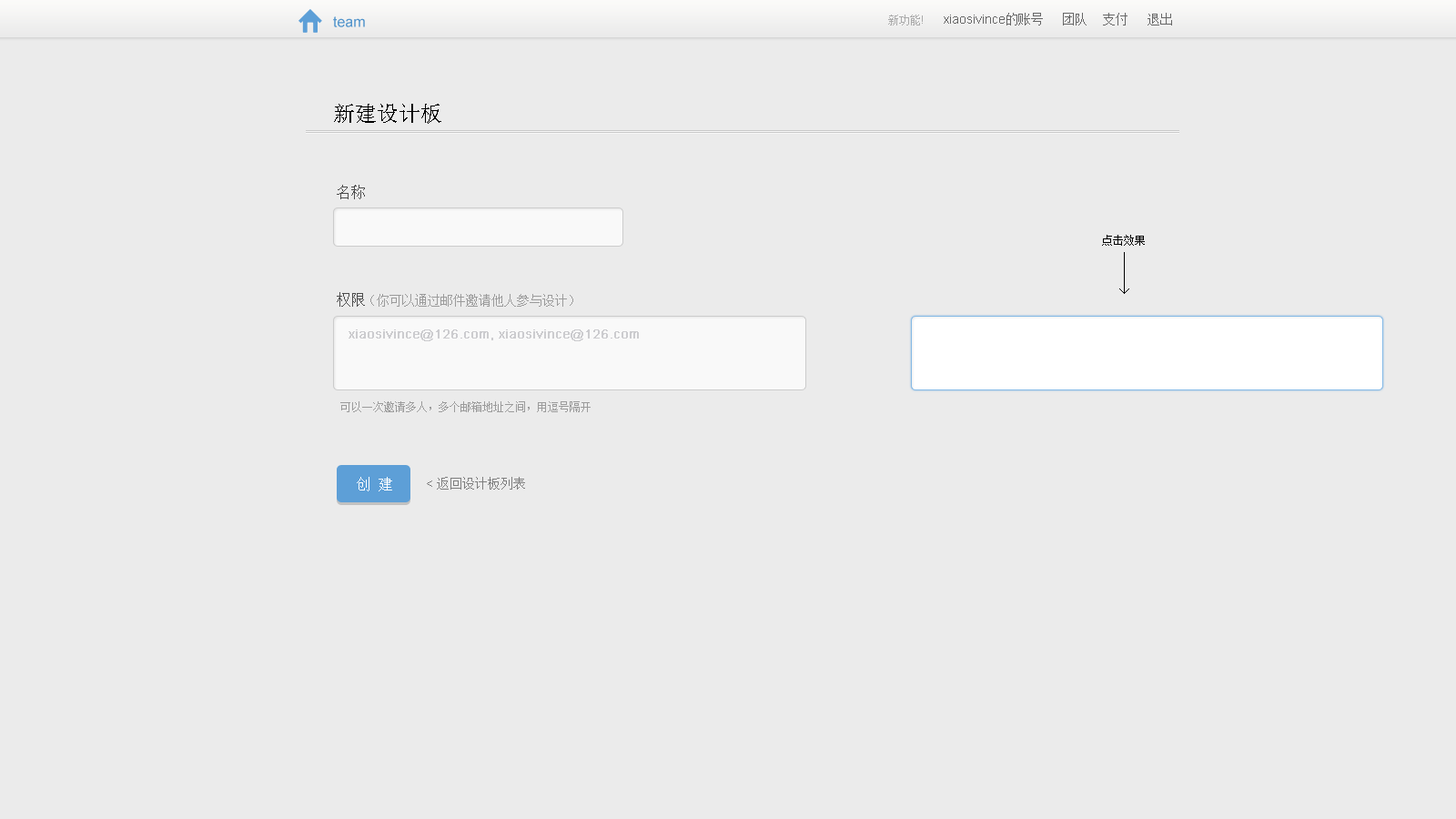
<style>
.page{position:relative;width:1456px;height:819px;background:#ebebeb}
.page>*{position:absolute;margin:0}
.t1{font:14.6px "ArialMT";color:#5495cc}
.t2{font:10.9px "SimSun";color:#aaaaaa}
.t3{font:10.9px "ArialMT";color:#aaaaaa}
.t4{font:12.7px "ArialMT";color:#666666}
.t5{font:12.7px "SimSun";color:#666666}
.t6{font:21.8px "SimSun";color:#000000}
.t7{font:14.6px "SimSun";color:#4c4c4c}
.t8{font:10.9px "SimSun";color:#000000}
.t9{font:12.7px "SimSun";color:#9b9b9b}
.t10{font:12.7px "ArialMT";color:#cccccf;font-weight:bold}
.t11{font:10.9px "SimSun";color:#9b9b9b}
.t12{font:14.6px "SimSun";color:#ffffff}
.t13{font:12.7px "SimSun";color:#7e7e7e}
.t14{font:12.7px "ArialMT";color:#7e7e7e}
</style>
<div class="page">
<p class="t1" style="left:333px;top:16px;width:32px;height:11px">team</p>
<p class="t2" style="left:888px;top:15px;width:35px;height:10px">新功能<span class="t3">!</span></p>
<p class="t4" style="left:944px;top:13px;width:99px;height:12px">xiaosivince<span class="t5">的账号</span></p>
<p class="t5" style="left:1063px;top:13px;width:24px;height:12px">团队</p>
<p class="t5" style="left:1103px;top:13px;width:24px;height:12px">支付</p>
<p class="t5" style="left:1147px;top:13px;width:25px;height:12px">退出</p>
<p class="t6" style="left:334px;top:104px;width:107px;height:20px">新建设计板</p>
<p class="t7" style="left:337px;top:185px;width:28px;height:14px">名称</p>
<p class="t8" style="left:1102px;top:235px;width:43px;height:11px">点击效果</p>
<p class="t7" style="left:337px;top:292px;width:28px;height:15px">权限</p>
<p class="t9" style="left:370px;top:294px;width:203px;height:13px">（你可以通过邮件邀请他人参与设计）</p>
<p class="t10" style="left:349px;top:329px;width:290px;height:12px">xiaosivince@126.com, xiaosivince@126.com</p>
<p class="t11" style="left:340px;top:401px;width:251px;height:11px">可以一次邀请多人，多个邮箱地址之间，用逗号隔开</p>
<p class="t12" style="left:357px;top:477px;width:35px;height:14px">创 建</p>
<p class="t13" style="left:427px;top:477px;width:98px;height:13px"><span class="t14">&lt; </span>返回设计板列表</p>
</div>
